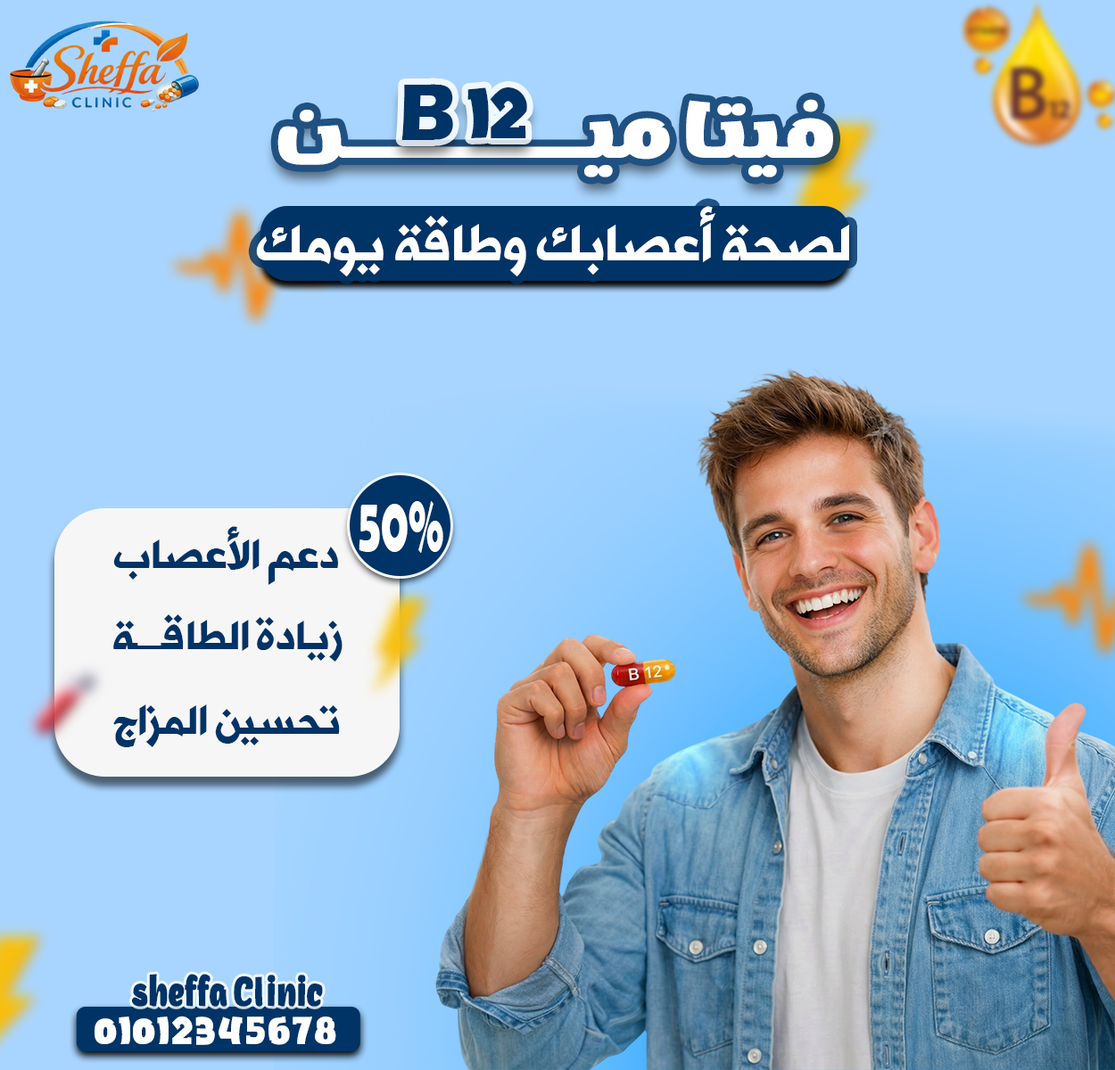
<style>
.page{position:relative;width:1115px;height:1070px;background:#a8d5ff}
.page>*{position:absolute;margin:0}
.t1{font:82.9px "ErasITC-Bold";letter-spacing:-0.06em;color:#003366}
.t2{font:61.5px "DGAqsa";letter-spacing:-0.06em;color:#003366}
.t3{font:70.7px "DGAqsa";letter-spacing:0.055em;color:#ffffff}
.t4{font:50.2px "AlHurraTxtBold";color:#ffffff}
.t5{font:79.4px "BerlinSansFBDemi-Bold";color:#ffffff;scale:0.56 1}
.t6{font:39.8px "AlHurraTxtBold";color:#003366}
.t7{font:41.3px "DGAqsa";color:#003366;scale:0.64 1}
.t8{font:33.6px "DGAqsa";color:#ffffff}
</style>
<div class="page">
<p class="t1" style="left:401px;top:84px;width:52px;height:56px">B</p>
<p class="t2" style="left:467px;top:87px;width:60px;height:51px">12</p>
<p class="t3" style="left:277px;top:99px;width:556px;height:78px">فيتاميــــــــن</p>
<p class="t4" style="left:256px;top:206px;width:593px;height:70px">لصحة أعصابك وطاقة يومك</p>
<p class="t5" style="left:358px;top:501px;width:85px;height:52px">50%</p>
<p class="t6" style="left:113px;top:526px;width:225px;height:59px">دعم الأعصاب</p>
<p class="t6" style="left:113px;top:614px;width:229px;height:48px">زيادة الطاقـــة</p>
<p class="t6" style="left:113px;top:704px;width:227px;height:43px">تحسين المزاج</p>
<p class="t7" style="left:132px;top:974px;width:191px;height:33px">sheffa Clinic</p>
<p class="t8" style="left:95px;top:1016px;width:241px;height:29px">01012345678</p>
</div>
